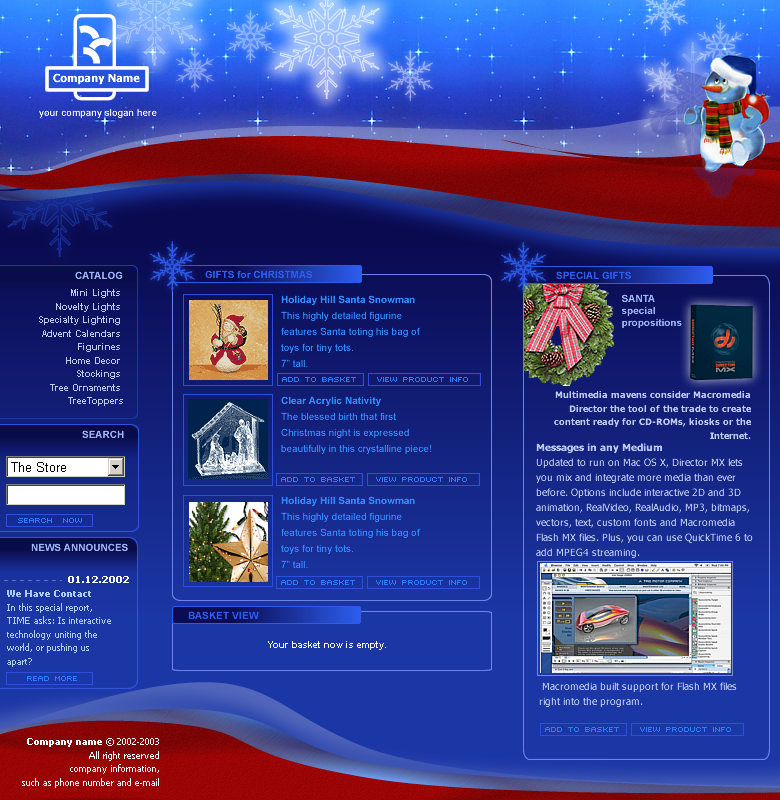
<style>
.page{position:relative;width:780px;height:800px}
.page>*{position:absolute;margin:0}
.t1{font:10px "ArialMT";color:#ffffff}
.t2{font:10px "Arial-BoldMT";color:#2d5ded}
.t3{font:10px "Arial-BoldMT";color:#9bb3f7}
.t4{font:9px/13.5px "Arial-BoldMT";color:#bfcbf2}
.t5{font:10px/12px "Arial-BoldMT";color:#9bb3f7}
.t6{font:10px/16px "ArialMT";color:#338dff}
.t7{font:10px/16px "Arial-BoldMT";color:#338dff}
.t8{font:8px "Sevenet 7 Cyr";letter-spacing:0.14em;color:#2e7bfd}
.t9{font:9px/13.5px "Tahoma-Bold";color:#bfcbf2}
.t10{font:10px/15px "Tahoma";color:#bfcbf2}
.t11{font:10px/15px "Tahoma-Bold";color:#bfcbf2}
.t12{font:9px "Tahoma-Bold";color:#ffffff}
.t13{font:9px/13.5px "Tahoma";color:#afcdfe}
.t14{font:9px/13.5px "Tahoma-Bold";color:#afcdfe}
.t15{font:9px "Arial-BoldMT";color:#ffffff}
.t16{font:9px/13.5px "Tahoma";color:#ffffff}
.t17{font:9px/13.5px "Tahoma-Bold";color:#ffffff}
</style>
<div class="page">
<p class="t1" style="left:39px;top:108px;width:118px;height:10px">your company slogan here</p>
<p class="t2" style="left:205px;top:270px;width:108px;height:8px">GIFTS for CHRISTMAS</p>
<p class="t3" style="left:75px;top:271px;width:48px;height:8px">CATALOG</p>
<p class="t2" style="left:556px;top:271px;width:75px;height:8px">SPECIAL GIFTS</p>
<p class="t4" style="left:39px;top:289px;width:84px;height:117px">Mini Lights <br>Novelty Lights <br>Specialty Lighting <br>Advent Calendars <br>Figurines <br>Home Decor <br>Stockings <br>Tree Ornaments <br>TreeToppers</p>
<p class="t5" style="left:622px;top:294px;width:60px;height:34px">SANTA<br>special<br>propositions</p>
<p class="t6" style="left:281px;top:295px;width:139px;height:72px"><span class="t7">Holiday Hill Santa Snowman</span><br>This highly detailed figurine <br>features Santa toting his bag of <br>toys for tiny tots.<br>7” tall.</p>
<p class="t8" style="left:282px;top:377px;width:186px;height:5px">add to basket    view product info</p>
<p class="t6" style="left:281px;top:396px;width:150px;height:58px"><span class="t7">Clear Acrylic Nativity</span> <br>The blessed birth that first <br>Christmas night is expressed <br>beautifully in this crystalline piece!</p>
<p class="t9" style="left:554px;top:391px;width:197px;height:48px">Multimedia mavens consider Macromedia <br>Director the tool of the trade to create <br>content ready for CD-ROMs, kiosks or the <br>Internet.</p>
<p class="t3" style="left:82px;top:430px;width:42px;height:8px">SEARCH</p>
<p class="t10" style="left:536px;top:443px;width:217px;height:115px"><span class="t11">Messages in any Medium</span><br>Updated to run on Mac OS X, Director MX lets <br>you mix and integrate more media than ever <br>before. Options include interactive 2D and 3D <br>animation, RealVideo, RealAudio, MP3, bitmaps, <br>vectors, text, custom fonts and Macromedia <br>Flash MX files. Plus, you can use QuickTime 6 to <br>add MPEG4 streaming.</p>
<p class="t8" style="left:281px;top:477px;width:186px;height:5px">add to basket    view product info</p>
<p class="t6" style="left:281px;top:496px;width:139px;height:72px"><span class="t7">Holiday Hill Santa Snowman</span><br>This highly detailed figurine <br>features Santa toting his bag of <br>toys for tiny tots.<br>7” tall.</p>
<p class="t8" style="left:18px;top:518px;width:64px;height:5px">search  now</p>
<p class="t3" style="left:31px;top:543px;width:97px;height:8px">NEWS ANNOUNCES</p>
<p class="t12" style="left:68px;top:576px;width:61px;height:7px">01.12.2002</p>
<p class="t8" style="left:281px;top:580px;width:186px;height:5px">add to basket    view product info</p>
<p class="t13" style="left:7px;top:590px;width:104px;height:77px"><span class="t14">We Have Contact</span><br>In this special report, <br>TIME asks: Is interactive <br>technology uniting the <br>world, or pushing us <br>apart?</p>
<p class="t2" style="left:188px;top:611px;width:71px;height:8px">BASKET VIEW</p>
<p class="t15" style="left:268px;top:641px;width:118px;height:9px">Your basket now is empty.</p>
<p class="t8" style="left:27px;top:676px;width:50px;height:5px">READ MORE</p>
<p class="t10" style="left:539px;top:682px;width:198px;height:25px">Macromedia built support for Flash MX files <br>right into the program.</p>
<p class="t8" style="left:545px;top:727px;width:186px;height:5px">add to basket    view product info</p>
<p class="t16" style="left:22px;top:738px;width:137px;height:50px"><span class="t17">Company name </span>© 2002-2003<br>All right reserved<br>company information,<br> such as phone number and e-mail</p>
</div>
